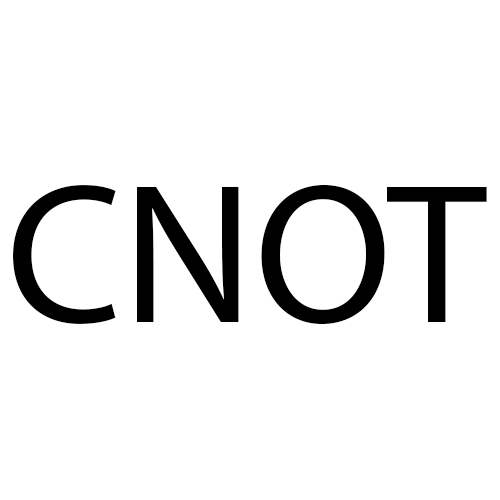
<style>
.page{position:relative;width:500px;height:500px;background:#ffffff}
.page>*{position:absolute;margin:0}
.t1{font:200px "MyriadPro-Regular";color:#000000}
</style>
<div class="page">
<p class="t1" style="left:13px;top:184px;width:474px;height:140px">CNOT</p>
</div>
